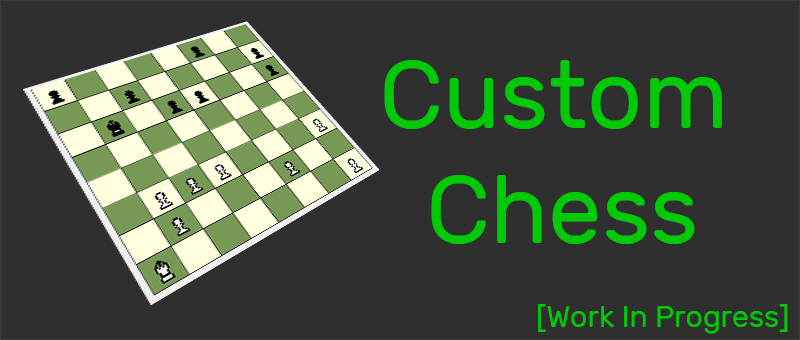
<style>
.page{position:relative;width:800px;height:340px;background:#2f2f2f}
.page>*{position:absolute;margin:0}
.t1{font:96px "Rubik-Regular";color:#00ca06}
.t2{font:30px "Rubik-Regular";color:#00ca06}
</style>
<div class="page">
<p class="t1" style="left:384px;top:60px;width:338px;height:184px">Custom<br>  Chess</p>
<p class="t2" style="left:538px;top:304px;width:250px;height:30px">[Work In Progress]</p>
</div>
